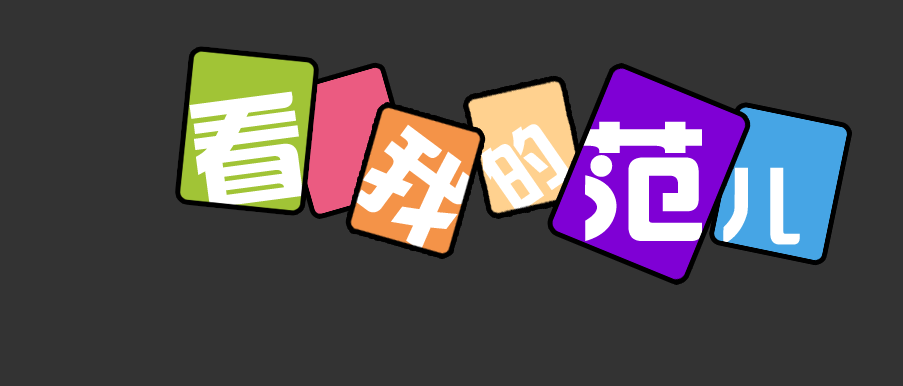
<style>
.page{position:relative;width:903px;height:386px;background:#333333}
.page>*{position:absolute;margin:0}
.t1{font:115px "hzgb";color:#ffffff}
.t2{font:104.6px "hzgb";color:#ffffff}
.t3{font:75.9px "hzgb";color:#ffffff}
.t4{font:129px "hzgb";color:#ffffff}
.t5{font:83px "hzgb";color:#ffffff}
</style>
<div class="page">
<p class="t1" style="left:189px;top:91px;width:115px;height:117px;rotate:-8deg">看</p>
<p class="t2" style="left:353px;top:124px;width:123px;height:127px;rotate:37deg">我</p>
<p class="t3" style="left:481px;top:124px;width:89px;height:90px;rotate:-35deg">的</p>
<p class="t4" style="left:583px;top:121px;width:119px;height:120px">范</p>
<p class="t5" style="left:723px;top:167px;width:77px;height:78px">儿</p>
</div>
